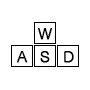
<style>
.page{position:relative;width:90px;height:90px;background:#ffffff}
.page>*{position:absolute;margin:0}
.t1{font:12px "Gulim";color:#000000;font-weight:bold}
</style>
<div class="page">
<p class="t1" style="left:38px;top:28px;width:14px;height:12px">W</p>
<p class="t1" style="left:17px;top:51px;width:11px;height:12px">A</p>
<p class="t1" style="left:40px;top:51px;width:10px;height:12px">S</p>
<p class="t1" style="left:64px;top:51px;width:10px;height:12px">D</p>
</div>
